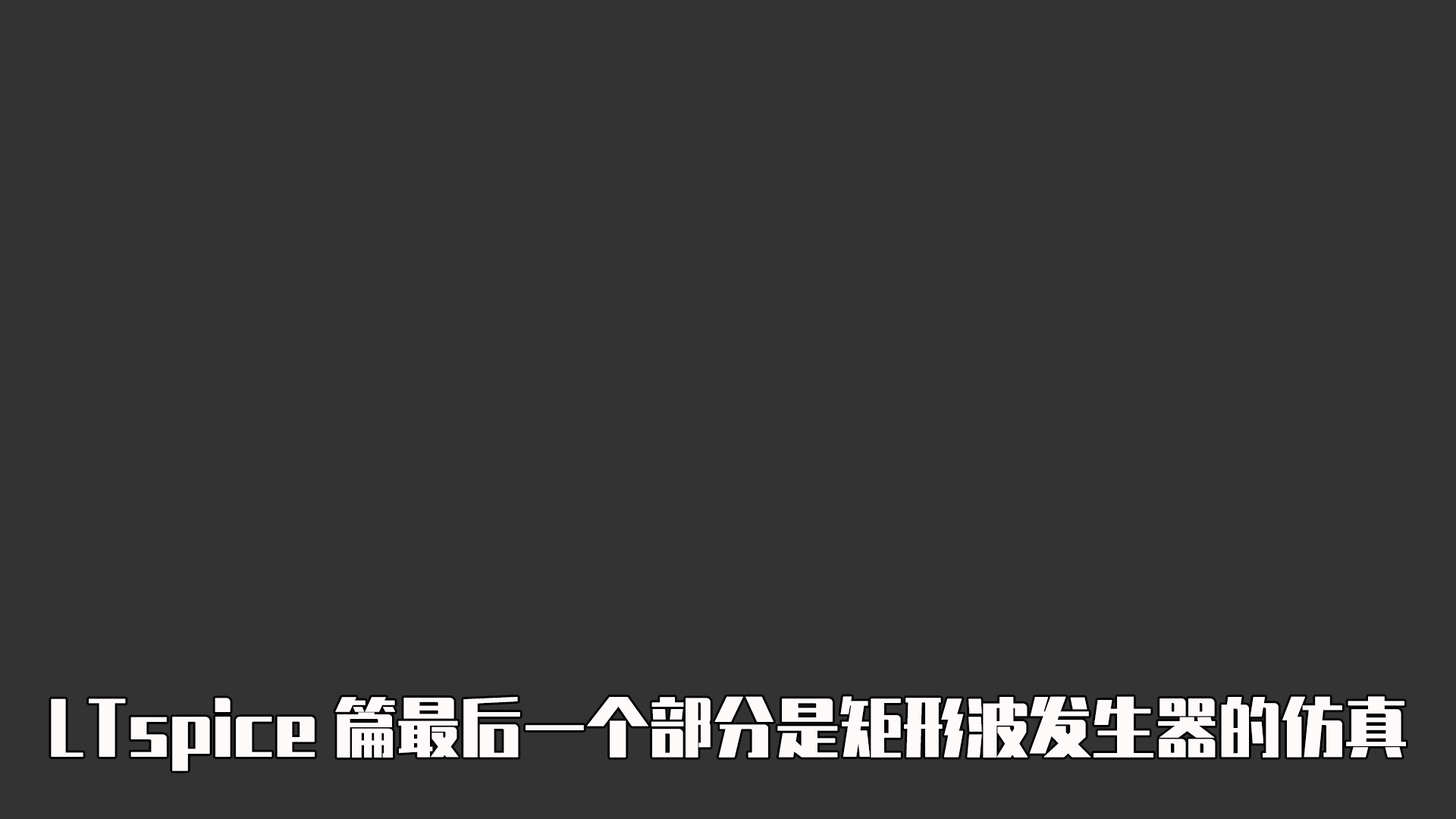
<style>
.page{position:relative;width:1456px;height:819px;background:#333333}
.page>*{position:absolute;margin:0}
.t1{font:63.2px "ZhenyanGB-Regular";color:#fefafa}
</style>
<div class="page">
<p class="t1" style="left:51px;top:696px;width:1355px;height:75px">LTspice篇最后一个部分是矩形波发生器的仿真</p>
</div>
